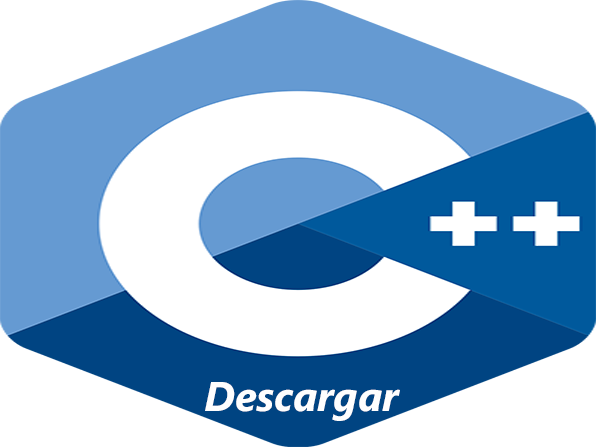
<style>
.page{position:relative;width:596px;height:447px;background:#ffffff}
.page>*{position:absolute;margin:0}
.t1{font:41.4px "SegoeUI-BoldItalic";color:#fefefe}
</style>
<div class="page">
<p class="t1" style="left:205px;top:382px;width:195px;height:39px">Descargar</p>
</div>
